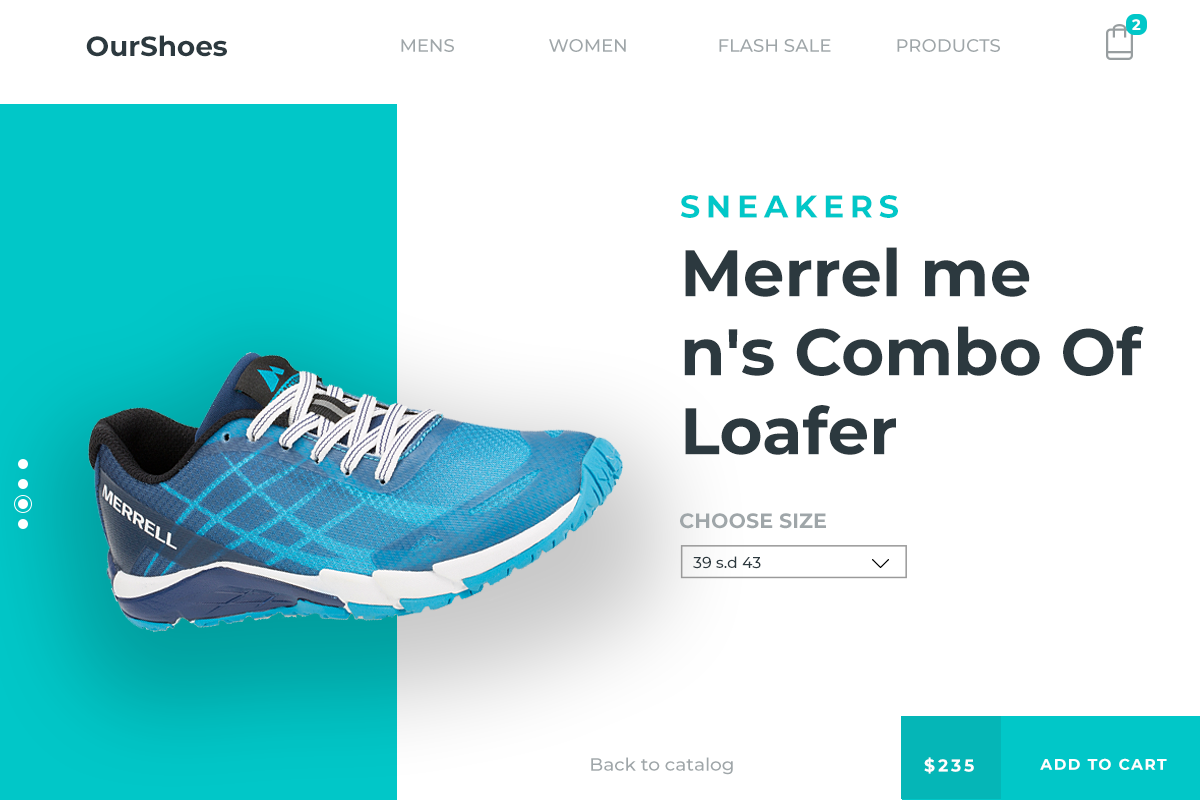
<style>
.page{position:relative;width:1200px;height:800px;background:#ffffff}
.page>*{position:absolute;margin:0}
.t1{font:14.9px "Montserrat-Bold";color:#ffffff}
.t2{font:27.8px "Montserrat-Bold";color:#2c393f}
.t3{font:18px "Montserrat-Medium";color:#9fa6a9}
.t4{font:65.8px/78.9px "Montserrat-Bold";color:#2c393f}
.t5{font:31.6px "Montserrat-Bold";letter-spacing:0.18em;color:#01c7c8}
.t6{font:20.6px "Montserrat-Bold";color:#9fa6a9}
.t7{font:15.6px "Montserrat-Medium";color:#2c393f}
.t8{font:17px "Montserrat-Bold";letter-spacing:0.18em;color:#ffffff}
.t9{font:15.3px "Montserrat-Bold";letter-spacing:0.1em;color:#ffffff}
</style>
<div class="page">
<p class="t1" style="left:1132px;top:19px;width:9px;height:11px">2</p>
<p class="t2" style="left:86px;top:35px;width:141px;height:22px">OurShoes</p>
<p class="t3" style="left:401px;top:39px;width:53px;height:13px">MENS</p>
<p class="t3" style="left:549px;top:39px;width:77px;height:13px">WOMEN</p>
<p class="t3" style="left:719px;top:39px;width:112px;height:13px">FLASH SALE</p>
<p class="t3" style="left:897px;top:39px;width:103px;height:13px">PRODUCTS</p>
<p class="t4" style="left:680px;top:195px;width:464px;height:260px"><span class="t5">SNEAKERS<br></span>Merrel me<br>n's Combo Of <br>Loafer</p>
<p class="t6" style="left:680px;top:513px;width:146px;height:16px">CHOOSE SIZE</p>
<p class="t7" style="left:693px;top:556px;width:68px;height:13px">39 s.d 43</p>
<p class="t3" style="left:591px;top:757px;width:142px;height:18px">Back to catalog</p>
<p class="t8" style="left:924px;top:757px;width:50px;height:17px">$235</p>
<p class="t9" style="left:1040px;top:758px;width:127px;height:12px">ADD TO CART</p>
</div>
